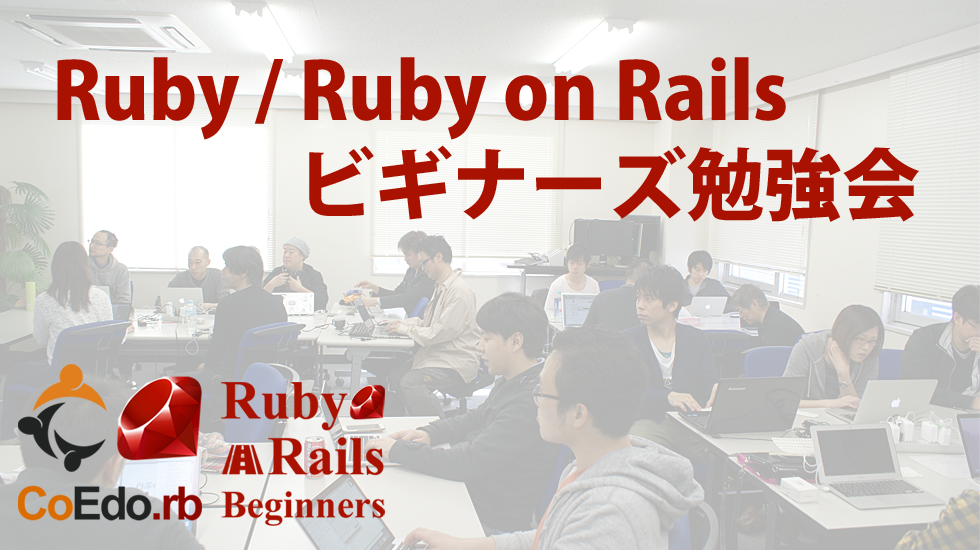
<style>
.page{position:relative;width:980px;height:550px}
.page>*{position:absolute;margin:0}
.t1{font:78px/94px "KozGoPr6N-Heavy";color:#a91100}
</style>
<div class="page">
<p class="t1" style="left:57px;top:57px;width:862px;height:165px">Ruby / Ruby on Rails <br>                 ビギナーズ勉強会</p>
</div>
